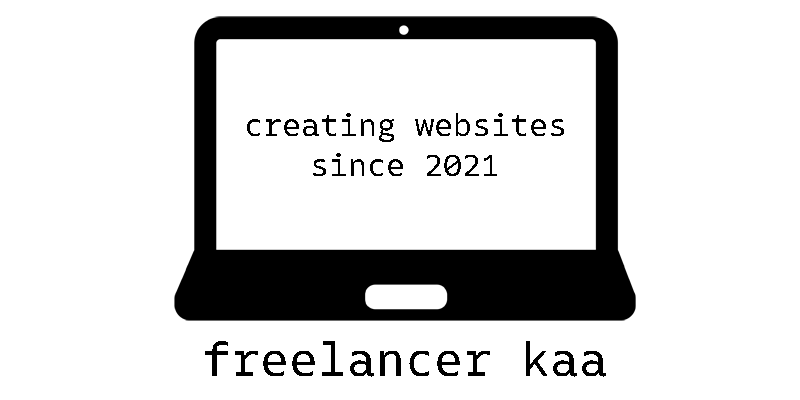
<style>
.page{position:relative;width:800px;height:400px;background:#ffffff}
.page>*{position:absolute;margin:0}
.t1{font:33.3px "Native-Regular";color:#000000}
.t2{font:50px "Native-Regular";color:#000000}
</style>
<div class="page">
<p class="t1" style="left:247px;top:113px;width:317px;height:63px;text-align:center">creating websites<br>since 2021</p>
<p class="t2" style="left:205px;top:341px;width:401px;height:36px">freelancer kaa</p>
</div>
